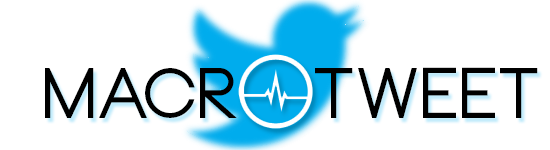
<style>
.page{position:relative;width:550px;height:150px;background:#ffffff}
.page>*{position:absolute;margin:0}
.t1{font:70px "Neou-Bold";color:#000000}
</style>
<div class="page">
<p class="t1" style="left:45px;top:67px;width:493px;height:51px">Macr   Tweet</p>
</div>
